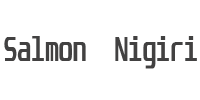
<style>
.page{position:relative;width:200px;height:100px;background:#ffffff}
.page>*{position:absolute;margin:0}
.t1{font:29px "Unispace-Bold";color:#424141;scale:0.8 1}
</style>
<div class="page">
<p class="t1" style="left:4px;top:36px;width:193px;height:33px">Salmon  Nigiri</p>
</div>
